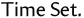
<style>
.page{position:relative;width:84px;height:18px;background:#ffffff}
.page>*{position:absolute;margin:0}
.t1{font:20px "Amira-Roman";color:#000000}
</style>
<div class="page">
<p class="t1" style="left:1px;top:2px;width:80px;height:15px;opacity:0.96">Time Set.</p>
</div>
